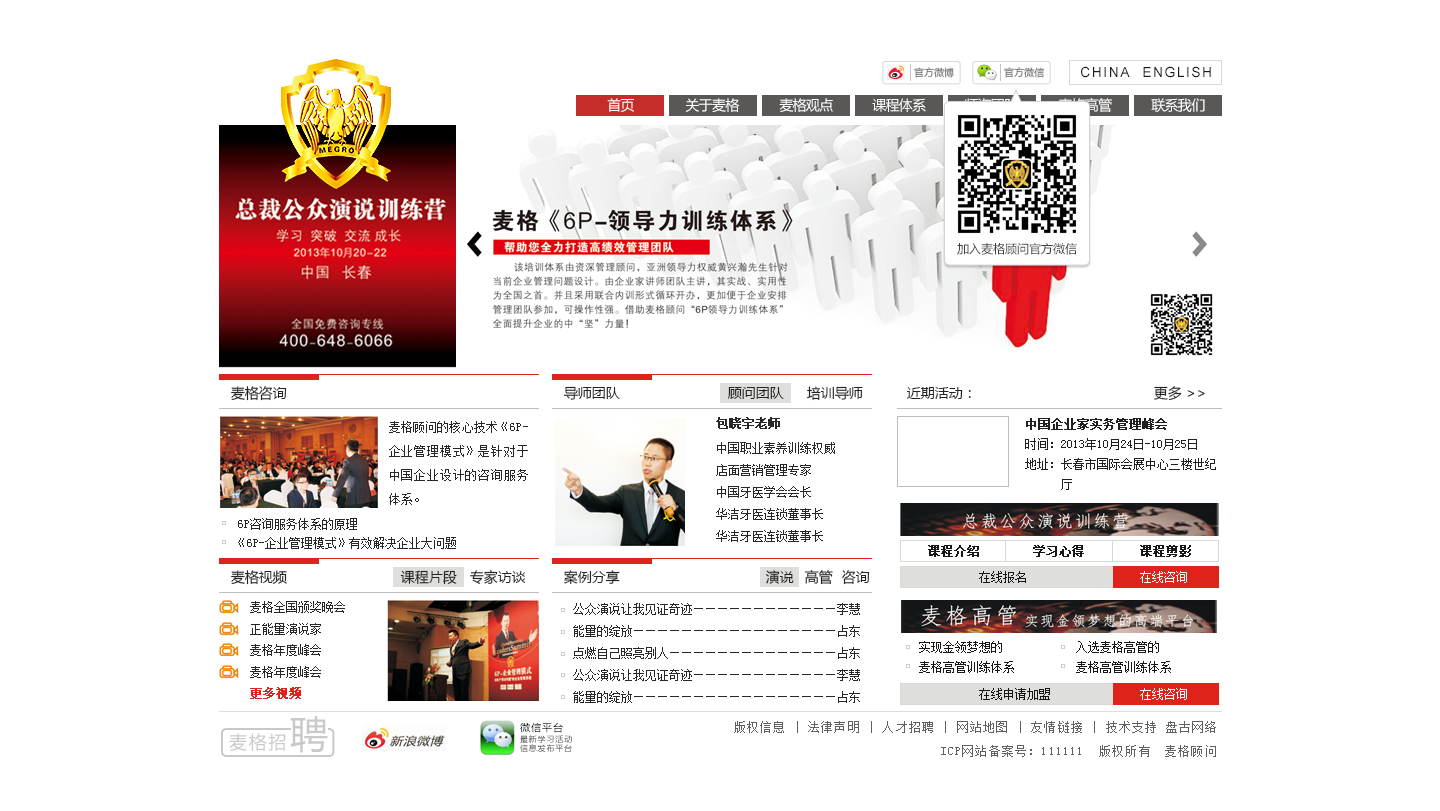
<style>
.page{position:relative;width:1440px;height:811px;background:#ffffff}
.page>*{position:absolute;margin:0}
.t1{font:10px "MicrosoftYaHei";color:#757575}
.t2{font:14px "ArialMT";letter-spacing:0.1em;color:#1c1c1c}
.t3{font:14px "MicrosoftYaHei";letter-spacing:-0.05em;color:#ffffff}
.t4{font:12px "MicrosoftYaHei";color:#3f3e3e}
.t5{font:14px "MicrosoftYaHei";color:#242424}
.t6{font:12px/24px "SimSun";color:#272727}
.t7{font:12px "SimSun";color:#272727;font-weight:bold}
.t8{font:12px/20px "SimSun";color:#202020}
.t9{font:12px/20px "SimSun";color:#202020;font-weight:bold}
.t10{font:12px/22px "SimSun";color:#272727}
.t11{font:12px "SimSun";color:#272727}
.t12{font:12px "SimSun";color:#181717;font-weight:bold}
.t13{font:12px "SimSun";color:#181717}
.t14{font:12px "SimSun";color:#ffffff}
.t15{font:12px "SimSun";color:#da251c;font-weight:bold}
.t16{font:38px "MicrosoftYaHei";letter-spacing:0.1em;color:#c8c9c9}
.t17{font:10px "MicrosoftYaHei";letter-spacing:0.1em;color:#060606}
.t18{font:12px "SimSun";letter-spacing:0.1em;color:#606060}
.t19{font:18px "MicrosoftYaHei";letter-spacing:0.1em;color:#c8c9c9}
.t20{font:8px/9px "MicrosoftYaHei";letter-spacing:0.1em}
</style>
<div class="page">
<p class="t1" style="left:914px;top:67px;width:40px;height:11px">官方微博</p>
<p class="t1" style="left:1004px;top:67px;width:41px;height:11px">官方微信</p>
<p class="t2" style="left:1081px;top:66px;width:49px;height:12px">CHINA</p>
<p class="t2" style="left:1143px;top:66px;width:68px;height:12px">ENGLISH</p>
<p class="t3" style="left:607px;top:98px;width:27px;height:14px">首页</p>
<p class="t3" style="left:685px;top:98px;width:55px;height:14px">关于麦格</p>
<p class="t3" style="left:779px;top:98px;width:54px;height:14px">麦格观点</p>
<p class="t3" style="left:872px;top:98px;width:54px;height:14px">课程体系</p>
<p class="t3" style="left:1058px;top:98px;width:54px;height:14px">麦格高管</p>
<p class="t3" style="left:1151px;top:98px;width:54px;height:14px">联系我们</p>
<p class="t4" style="left:957px;top:242px;width:120px;height:13px">加入麦格顾问官方微信</p>
<p class="t5" style="left:231px;top:386px;width:56px;height:15px">麦格咨询</p>
<p class="t5" style="left:563px;top:386px;width:57px;height:14px">导师团队</p>
<p class="t5" style="left:727px;top:387px;width:57px;height:12px">顾问团队</p>
<p class="t5" style="left:807px;top:386px;width:56px;height:15px">培训导师</p>
<p class="t5" style="left:907px;top:387px;width:64px;height:12px">近期活动：</p>
<p class="t5" style="left:1154px;top:386px;width:51px;height:15px">更多 &gt;&gt;</p>
<p class="t6" style="left:389px;top:421px;width:139px;height:84px;text-align:justify">麦格顾问的核心技术《6P-企业管理模式》是针对于中国企业设计的咨询服务体系。</p>
<p class="t7" style="left:716px;top:417px;width:64px;height:12px">包晓宇老师</p>
<p class="t8" style="left:1025px;top:418px;width:191px;height:72px;text-align:justify"><span class="t9">中国企业家实务管理峰会<br></span>时间：2013年10月24日-10月25日<br>地址：长春市国际会展中心三楼世纪<br>      厅</p>
<p class="t10" style="left:716px;top:442px;width:119px;height:100px;text-align:justify">中国职业素养训练权威<br>店面营销管理专家<br>中国牙医学会会长<br>华洁牙医连锁董事长<br>华洁牙医连锁董事长</p>
<p class="t11" style="left:238px;top:518px;width:119px;height:12px">6P咨询服务体系的原理</p>
<p class="t11" style="left:238px;top:537px;width:218px;height:12px">《6P-企业管理模式》有效解决企业大问题</p>
<p class="t12" style="left:928px;top:545px;width:51px;height:12px">课程介绍</p>
<p class="t12" style="left:1033px;top:545px;width:51px;height:12px">学习心得</p>
<p class="t12" style="left:1140px;top:545px;width:51px;height:12px">课程剪影</p>
<p class="t5" style="left:231px;top:570px;width:56px;height:15px">麦格视频</p>
<p class="t5" style="left:400px;top:570px;width:57px;height:15px">课程片段</p>
<p class="t5" style="left:470px;top:570px;width:56px;height:15px">专家访谈</p>
<p class="t5" style="left:564px;top:570px;width:56px;height:15px">案例分享</p>
<p class="t5" style="left:765px;top:570px;width:29px;height:14px">演说</p>
<p class="t5" style="left:804px;top:570px;width:29px;height:15px">高管</p>
<p class="t5" style="left:842px;top:570px;width:28px;height:15px">咨询</p>
<p class="t13" style="left:979px;top:571px;width:47px;height:12px">在线报名</p>
<p class="t14" style="left:1140px;top:571px;width:47px;height:12px">在线咨询</p>
<p class="t11" style="left:250px;top:601px;width:95px;height:12px">麦格全国颁奖晚会</p>
<p class="t10" style="left:573px;top:603px;width:287px;height:100px;text-align:justify">公众演说让我见证奇迹————————————李慧<br>能量的绽放—————————————————占东<br>点燃自己照亮别人——————————————占东<br>公众演说让我见证奇迹————————————李慧<br>能量的绽放—————————————————占东</p>
<p class="t11" style="left:250px;top:623px;width:71px;height:12px">正能量演说家</p>
<p class="t13" style="left:919px;top:641px;width:83px;height:12px">实现金领梦想的</p>
<p class="t13" style="left:1076px;top:641px;width:83px;height:12px">入选麦格高管的</p>
<p class="t11" style="left:250px;top:644px;width:71px;height:12px">麦格年度峰会</p>
<p class="t13" style="left:919px;top:661px;width:95px;height:12px">麦格高管训练体系</p>
<p class="t13" style="left:1076px;top:661px;width:95px;height:12px">麦格高管训练体系</p>
<p class="t11" style="left:250px;top:666px;width:71px;height:12px">麦格年度峰会</p>
<p class="t15" style="left:250px;top:687px;width:51px;height:12px">更多视频</p>
<p class="t13" style="left:979px;top:688px;width:71px;height:12px">在线申请加盟</p>
<p class="t14" style="left:1140px;top:688px;width:47px;height:12px">在线咨询</p>
<p class="t16" style="left:290px;top:716px;width:38px;height:37px">聘</p>
<p class="t17" style="left:520px;top:722px;width:43px;height:11px">微信平台</p>
<p class="t18" style="left:734px;top:721px;width:482px;height:12px">版权信息 | 法律声明 | 人才招聘 | 网站地图 | 友情链接 | 技术支持 盘古网络</p>
<p class="t19" style="left:229px;top:733px;width:57px;height:18px">麦格招</p>
<p class="t20" style="left:520px;top:735px;width:52px;height:17px;text-align:justify">最新学习活动<br>信息发布平台</p>
<p class="t18" style="left:941px;top:745px;width:275px;height:12px">ICP网站备案号：111111  版权所有　麦格顾问</p>
</div>
